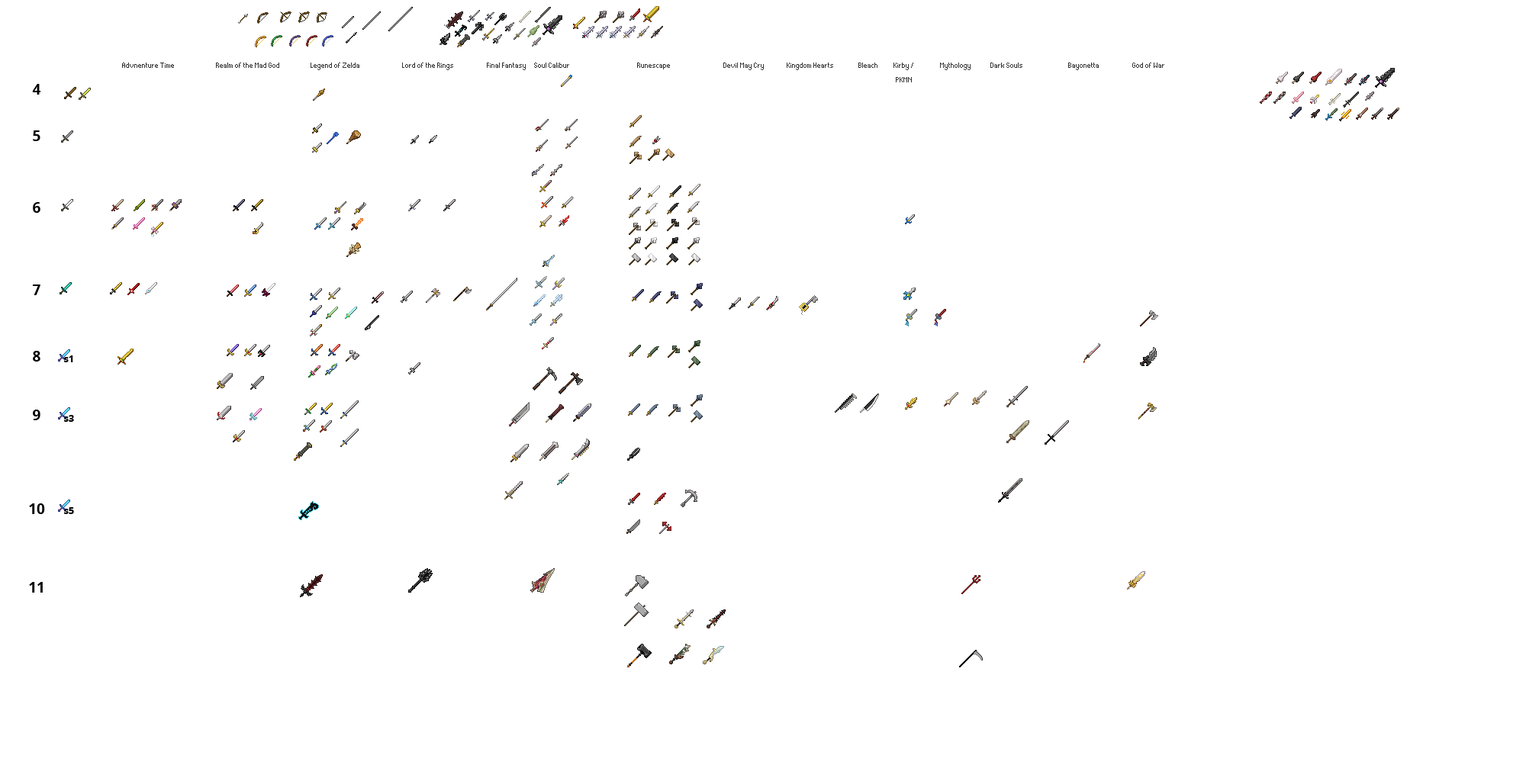
<style>
.page{position:relative;width:1526px;height:781px;background:#ffffff}
.page>*{position:absolute;margin:0}
.t1{font:12.2px "Thintel";color:#343434}
.t2{font:14.5px "OpenSans-Bold";color:#000000}
.t3{font:9.9px "OpenSans-Bold";color:#000000}
</style>
<div class="page">
<p class="t1" style="left:122px;top:63px;width:52px;height:5px">Advnenture Time</p>
<p class="t1" style="left:216px;top:63px;width:63px;height:5px">Realm of the Mad God</p>
<p class="t1" style="left:311px;top:63px;width:48px;height:7px">Legend of Zelda</p>
<p class="t1" style="left:402px;top:63px;width:51px;height:7px">Lord of the Rings</p>
<p class="t1" style="left:487px;top:63px;width:39px;height:7px">Final Fantasy</p>
<p class="t1" style="left:534px;top:63px;width:35px;height:5px">Soul Calibur</p>
<p class="t1" style="left:637px;top:63px;width:33px;height:6px">Runescape</p>
<p class="t1" style="left:723px;top:63px;width:41px;height:7px">Devil May Cry</p>
<p class="t1" style="left:787px;top:63px;width:46px;height:7px">Kingdom Hearts</p>
<p class="t1" style="left:858px;top:63px;width:20px;height:5px">Bleach</p>
<p class="t1" style="left:894px;top:63px;width:19px;height:19px;text-align:center">Kirby /<br>PKMN</p>
<p class="t1" style="left:940px;top:63px;width:31px;height:7px">Mythology</p>
<p class="t1" style="left:990px;top:63px;width:32px;height:5px">Dark Souls</p>
<p class="t1" style="left:1068px;top:63px;width:31px;height:7px">Bayonetta</p>
<p class="t1" style="left:1132px;top:63px;width:32px;height:5px">God of War</p>
<p class="t2" style="left:32px;top:84px;width:8px;height:11px">4</p>
<p class="t2" style="left:33px;top:130px;width:7px;height:11px">5</p>
<p class="t2" style="left:33px;top:202px;width:7px;height:11px">6</p>
<p class="t2" style="left:33px;top:285px;width:7px;height:10px">7</p>
<p class="t2" style="left:33px;top:351px;width:7px;height:11px">8</p>
<p class="t3" style="left:64px;top:356px;width:9px;height:6px">s1</p>
<p class="t2" style="left:33px;top:410px;width:7px;height:10px">9</p>
<p class="t3" style="left:64px;top:415px;width:10px;height:7px">s3</p>
<p class="t2" style="left:29px;top:504px;width:16px;height:10px">10</p>
<p class="t3" style="left:64px;top:507px;width:10px;height:7px">s5</p>
<p class="t2" style="left:29px;top:582px;width:14px;height:11px">11</p>
</div>
